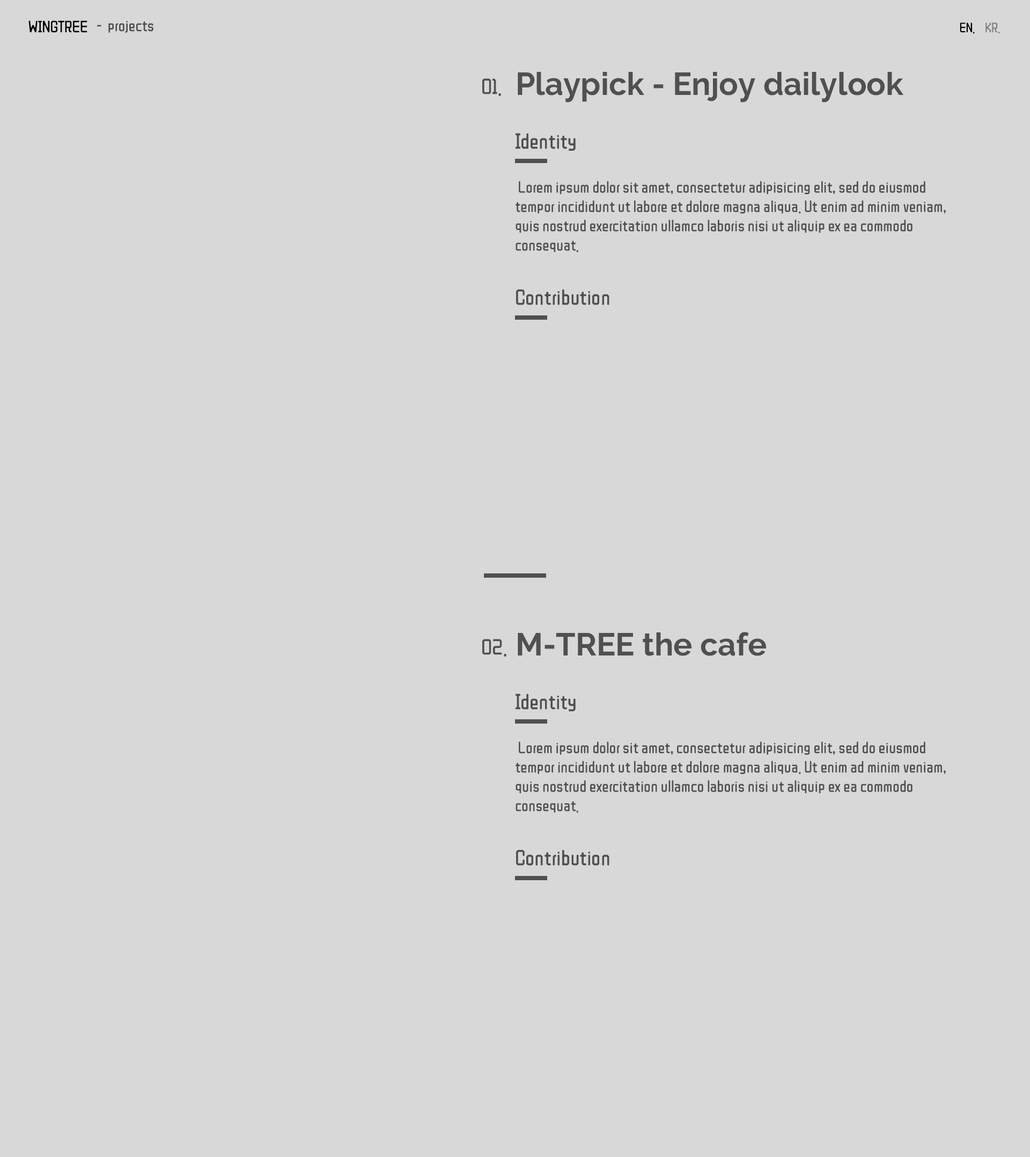
<style>
.page{position:relative;width:1030px;height:1157px;background:#d8d8d8}
.page>*{position:absolute;margin:0}
.t1{font:16.1px "ZCOOLQingKeHuangYou-Regular";color:#000000}
.t2{font:16.1px "ZCOOLQingKeHuangYou-Regular";color:#505050}
.t3{font:13.4px "ZCOOLQingKeHuangYou-Regular";color:#000000}
.t4{font:13.4px "ZCOOLQingKeHuangYou-Regular";color:#808080}
.t5{font:31.7px "Raleway-Bold";color:#505050}
.t6{font:21.5px "ZCOOLQingKeHuangYou-Regular";color:#505050}
</style>
<div class="page">
<p class="t1" style="left:28px;top:20px;width:59px;height:13px">WINGTREE</p>
<p class="t2" style="left:97px;top:21px;width:56px;height:12px">-  projects</p>
<p class="t3" style="left:960px;top:23px;width:40px;height:11px">EN.    <span class="t4">KR.</span></p>
<p class="t5" style="left:518px;top:72px;width:386px;height:30px">Playpick - Enjoy dailylook</p>
<p class="t6" style="left:482px;top:78px;width:19px;height:18px">01.</p>
<p class="t6" style="left:515px;top:133px;width:61px;height:18px">Identity</p>
<p class="t2" style="left:516px;top:181px;width:430px;height:71px">Lorem ipsum dolor sit amet, consectetur adipisicing elit, sed do eiusmod tempor incididunt ut labore et dolore magna aliqua. Ut enim ad minim veniam, quis nostrud exercitation ullamco laboris nisi ut aliquip ex ea commodo consequat.</p>
<p class="t6" style="left:516px;top:289px;width:94px;height:16px">Contribution</p>
<p class="t6" style="left:482px;top:639px;width:25px;height:18px">02.</p>
<p class="t5" style="left:518px;top:632px;width:248px;height:24px">M-TREE the cafe</p>
<p class="t6" style="left:515px;top:694px;width:61px;height:18px">Identity</p>
<p class="t2" style="left:516px;top:742px;width:430px;height:71px">Lorem ipsum dolor sit amet, consectetur adipisicing elit, sed do eiusmod tempor incididunt ut labore et dolore magna aliqua. Ut enim ad minim veniam, quis nostrud exercitation ullamco laboris nisi ut aliquip ex ea commodo consequat.</p>
<p class="t6" style="left:516px;top:850px;width:94px;height:16px">Contribution</p>
</div>
